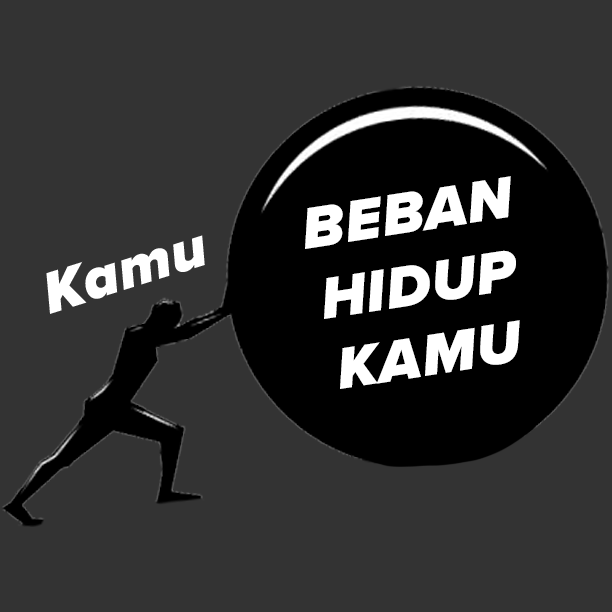
<style>
.page{position:relative;width:612px;height:612px;background:#333333}
.page>*{position:absolute;margin:0}
.t1{font:60px "FONTSPRINGDEMO-ProximaNovaBlackItalic";letter-spacing:0.02em;color:#ffffff}
</style>
<div class="page">
<p class="t1" style="left:305px;top:176px;width:215px;height:213px;rotate:-9deg">BEBAN HIDUP KAMU</p>
<p class="t1" style="left:46px;top:235px;width:159px;height:79px;rotate:-17deg">Kamu</p>
</div>
